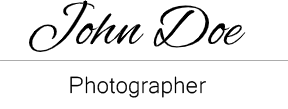
<style>
.page{position:relative;width:288px;height:109px;background:#ffffff}
.page>*{position:absolute;margin:0}
.t1{font:60.7px "AlexBrush-Regular";color:#000000}
.t2{font:30.3px "Microsoft-Yi-Baiti";color:#000000}
</style>
<div class="page">
<p class="t1" style="left:29px;top:0px;width:217px;height:52px">John Doe</p>
<p class="t2" style="left:70px;top:76px;width:136px;height:22px">Photographer</p>
</div>
